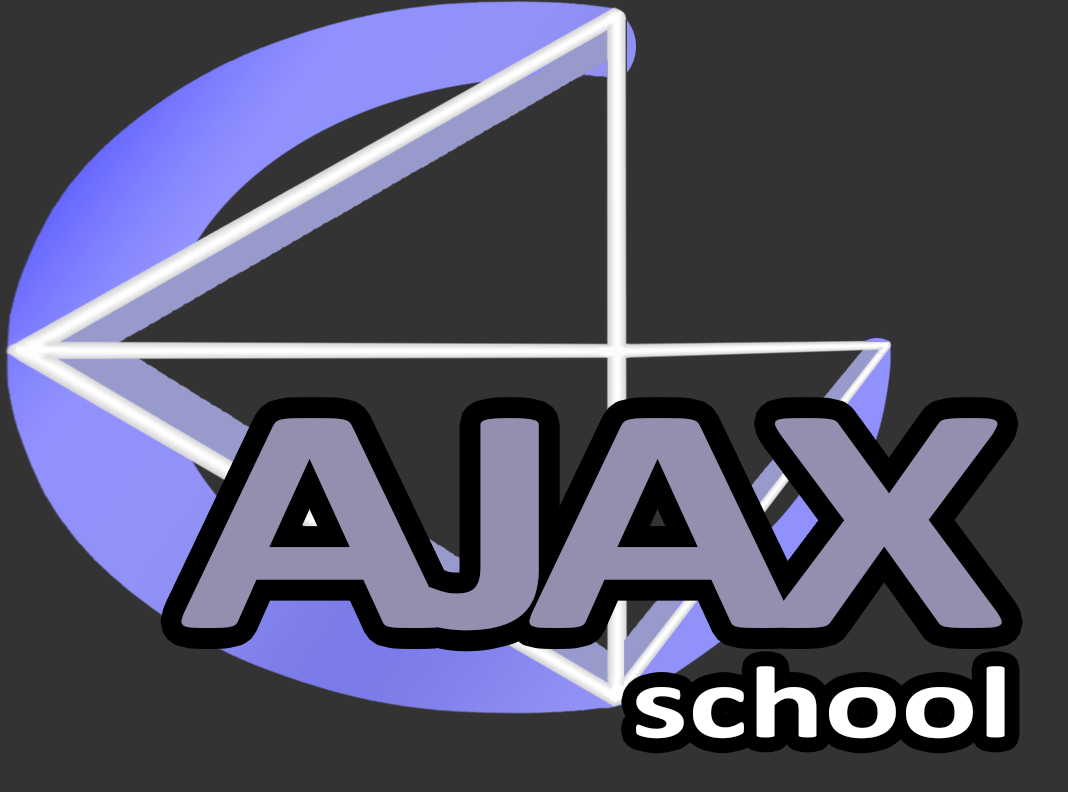
<style>
.page{position:relative;width:1068px;height:792px;background:#333333}
.page>*{position:absolute;margin:0}
.t1{font:329.2px "Calibri-Bold";letter-spacing:-0.079em;color:#9390af;scale:1.37 1}
.t2{font:104.2px "Calibri-Bold";color:#ffffff;scale:1.37 1}
</style>
<div class="page">
<p class="t1" style="left:181px;top:418px;width:821px;height:213px">AJAX</p>
<p class="t2" style="left:636px;top:666px;width:369px;height:73px">school</p>
</div>
